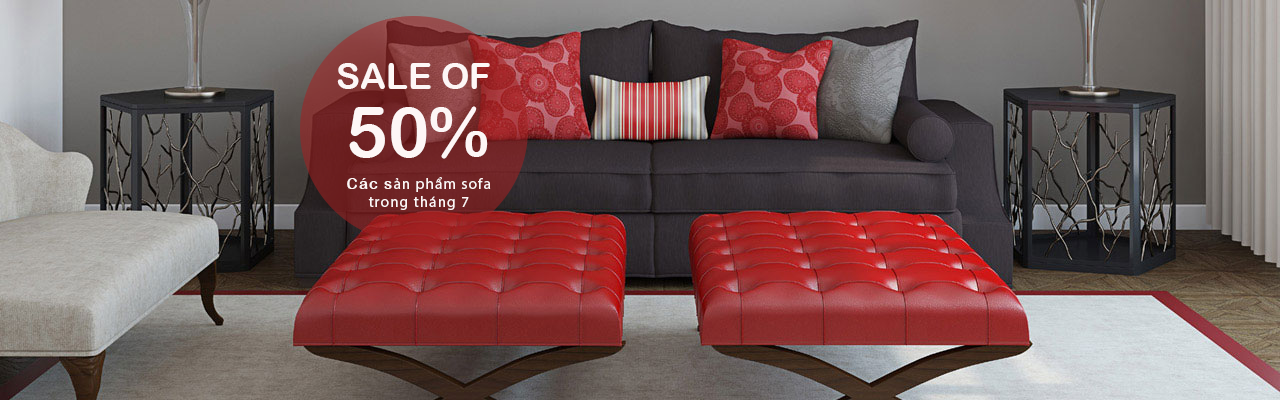
<style>
.page{position:relative;width:1280px;height:400px}
.page>*{position:absolute;margin:0}
.t1{font:36px "ArialRoundedMTBold";color:#fdf6f6}
.t2{font:70px "ArialRoundedMTBold";color:#fdf6f6}
.t3{font:15px "MyriadPro-Regular";letter-spacing:0.08em;color:#fdf6f6}
.t4{font:15px "ArialRoundedMTBold";letter-spacing:0.08em;color:#fdf6f6}
</style>
<div class="page">
<p class="t1" style="left:337px;top:63px;width:153px;height:26px">SALE OF</p>
<p class="t2" style="left:349px;top:106px;width:139px;height:53px">50%</p>
<p class="t3" style="left:347px;top:177px;width:144px;height:33px;text-align:center"><span class="t4">Các s</span>ản phẩm sofa<br>trong tháng 7</p>
</div>
